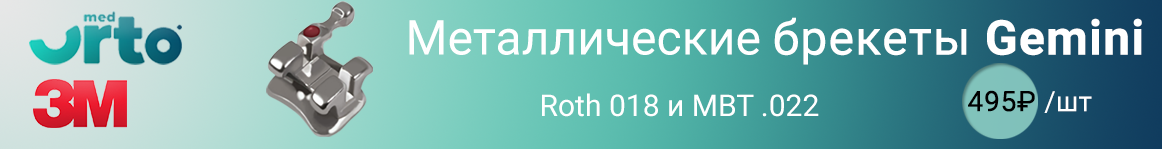
<style>
.page{position:relative;width:1162px;height:149px}
.page>*{position:absolute;margin:0}
.t1{font:30px/61.5px "Roboto-Regular";color:#ffffff}
.t2{font:48px/61.5px "Roboto-Regular";color:#ffffff}
.t3{font:48px/61.5px "Roboto-Regular";color:#ffffff;font-weight:bold}
.t4{font:48px/61.5px "Roboto-Bold";color:#ffffff;font-weight:bold}
.t5{font:28px "Roboto-Regular";color:#000101;font-weight:bold}
.t6{font:28px "Roboto-Regular";color:#ffffff}
</style>
<div class="page">
<p class="t1" style="left:409px;top:17px;width:733px;height:100px"><span class="t2">Металлические </span><span class="t3">брекеты </span><span class="t4">Gemini <br></span>                  Roth 018 и MBT .022</p>
<p class="t5" style="left:968px;top:90px;width:124px;height:23px">495₽ <span class="t6">/шт</span></p>
</div>
